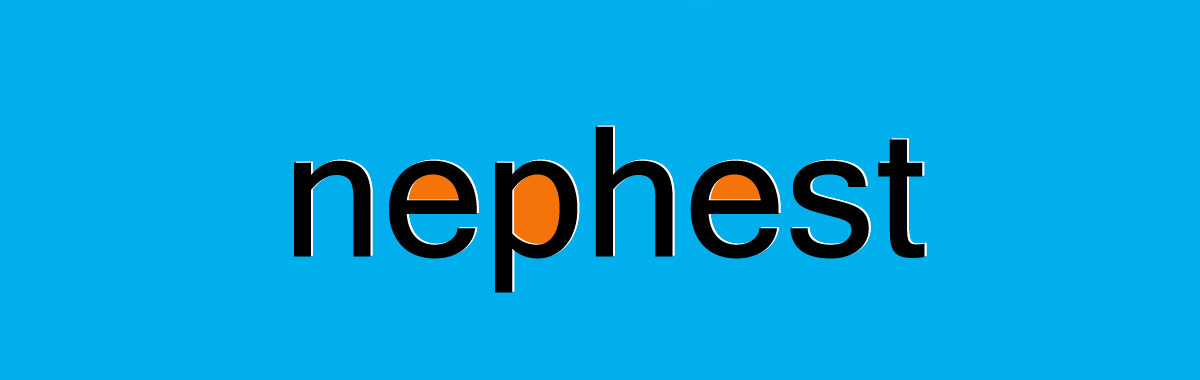
<style>
.page{position:relative;width:1200px;height:380px;background:#00afeb}
.page>*{position:absolute;margin:0}
.t1{font:274px "Vrinda";color:#000000}
</style>
<div class="page">
<p class="t1" style="left:294px;top:126px;width:631px;height:167px">nephest</p>
</div>
